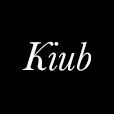
<style>
.page{position:relative;width:114px;height:114px;background:#000000}
.page>*{position:absolute;margin:0}
.t1{font:41.7px "Baskerville-Italic";color:#fffaf5}
</style>
<div class="page">
<p class="t1" style="left:22px;top:41px;width:69px;height:30px">Kiub</p>
</div>
